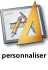
<style>
.page{position:relative;width:48px;height:70px;background:#ffffff}
.page>*{position:absolute;margin:0}
.t1{font:7.1px "SegoeUI-Bold";color:#000000}
</style>
<div class="page">
<p class="t1" style="left:2px;top:52px;width:45px;height:8px">personnaliser</p>
</div>
